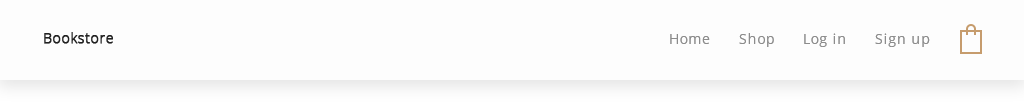
<style>
.page{position:relative;width:1024px;height:107px;background:#fdfdfd}
.page>*{position:absolute;margin:0}
.t1{font:14px "OpenSans-Light";letter-spacing:0.05em;color:#212121;font-weight:bold}
.t2{font:14px "OpenSans";letter-spacing:0.05em;color:#8c8c8c}
</style>
<div class="page">
<p class="t1" style="left:44px;top:32px;width:69px;height:12px">Bookstore</p>
<p class="t2" style="left:670px;top:34px;width:40px;height:10px">Home</p>
<p class="t2" style="left:739px;top:33px;width:35px;height:14px">Shop</p>
<p class="t2" style="left:804px;top:33px;width:41px;height:14px">Log in</p>
<p class="t2" style="left:875px;top:33px;width:55px;height:14px">Sign up</p>
</div>
